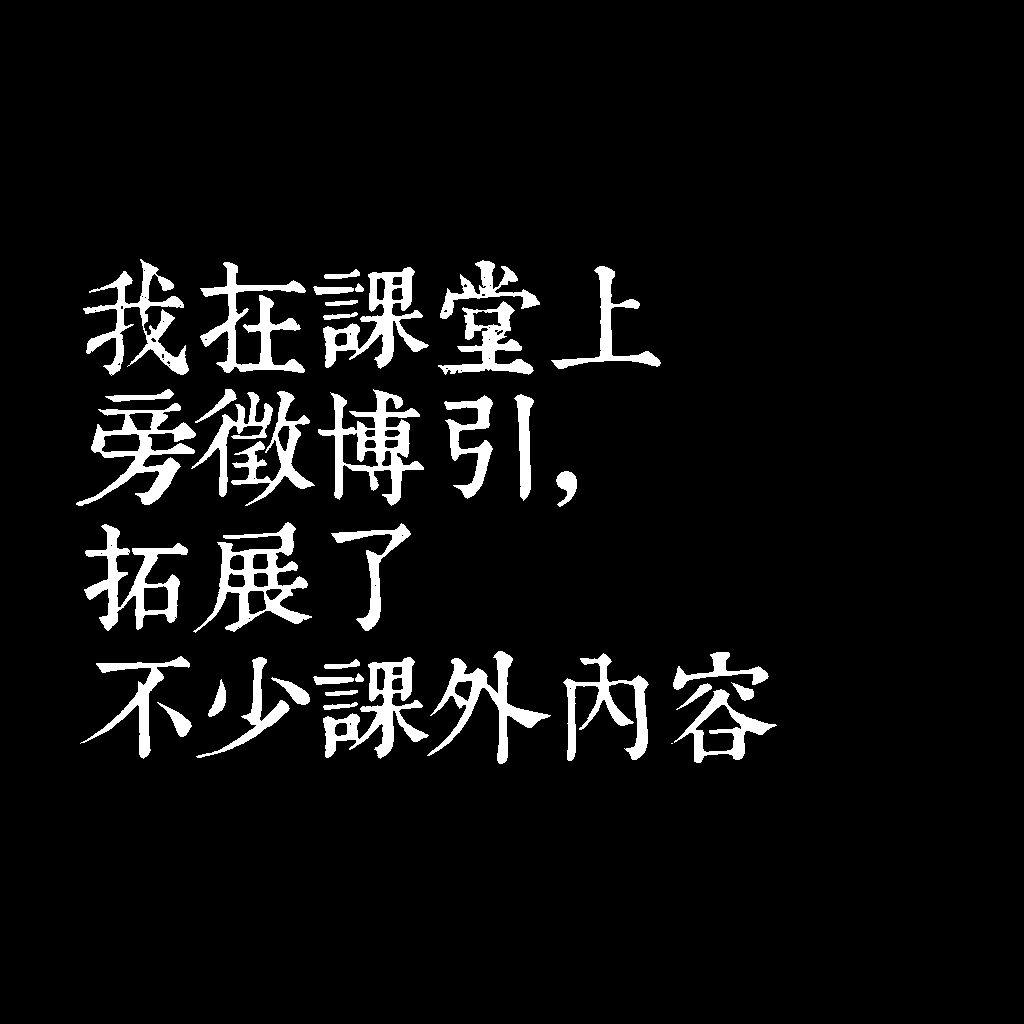
<style>
.page{position:relative;width:1024px;height:1024px;background:#000000}
.page>*{position:absolute;margin:0}
.t1{font:120px/130px "TpldKhangXiDictTrial";letter-spacing:-0.02em;color:#ffffff}
</style>
<div class="page">
<p class="t1" style="left:76px;top:259px;width:701px;height:505px">我在課堂上<br>旁徵博引，<br>拓展了<br>不少課外內容</p>
</div>
